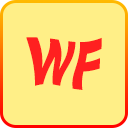
<style>
.page{position:relative;width:128px;height:128px;background:#ffef87}
.page>*{position:absolute;margin:0}
.t1{font:72px "Tahoma-Bold";color:#ff2020;scale:0.67 1}
</style>
<div class="page">
<p class="t1" style="left:26px;top:37px;width:76px;height:53px">WF</p>
</div>
